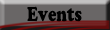
<style>
.page{position:relative;width:110px;height:30px;background:#696666}
.page>*{position:absolute;margin:0}
.t1{font:20px "CooperBlackStd";color:#000000;scale:0.75 1}
</style>
<div class="page">
<p class="t1" style="left:27px;top:6px;width:55px;height:16px">Events</p>
</div>
